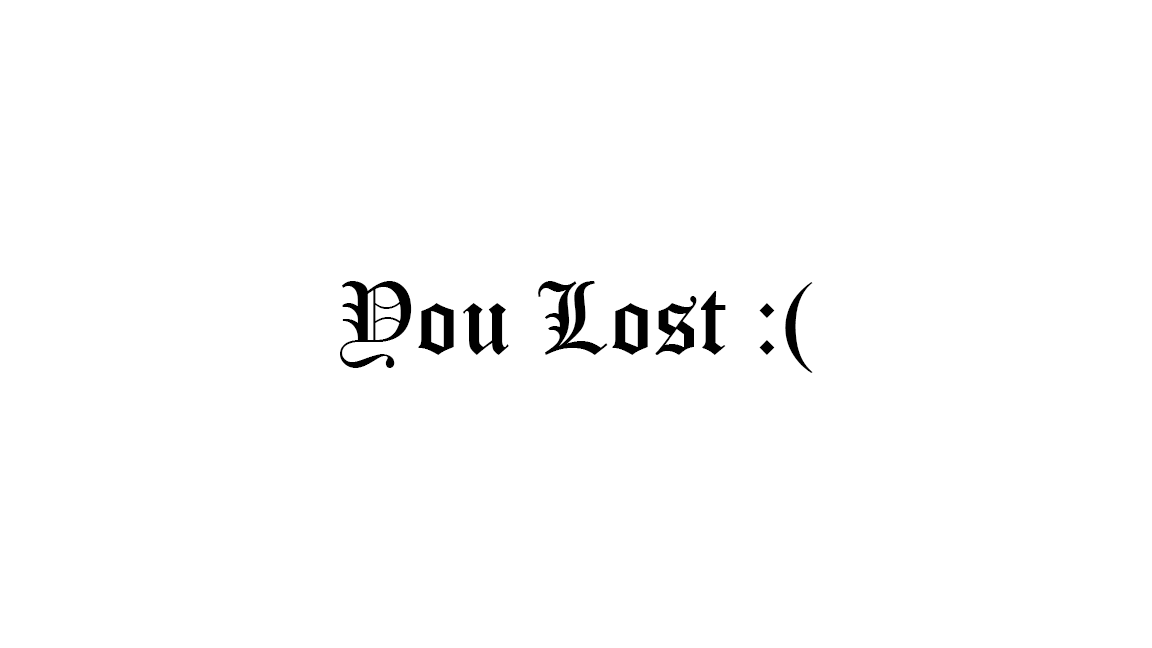
<style>
.page{position:relative;width:1152px;height:648px;background:#ffffff}
.page>*{position:absolute;margin:0}
.t1{font:100px "OldEnglishTextMT";color:#000000}
</style>
<div class="page">
<p class="t1" style="left:340px;top:281px;width:473px;height:92px">You Lost :(</p>
</div>
